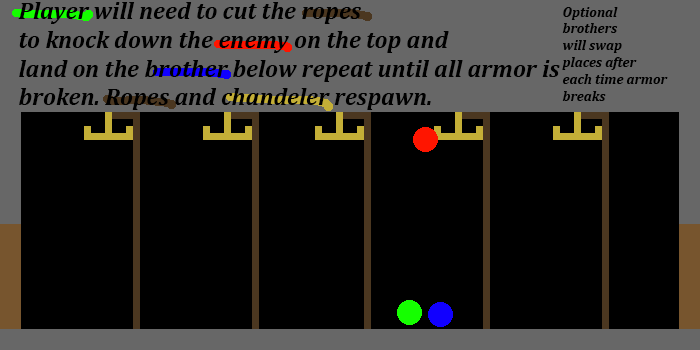
<style>
.page{position:relative;width:700px;height:350px;background:#000000}
.page>*{position:absolute;margin:0}
.t1{font:24px "Cambria-BoldItalic";color:#000000}
.t2{font:14px "Cambria-BoldItalic";color:#000000}
</style>
<div class="page">
<p class="t1" style="left:18px;top:2px;width:542px;height:108px">Player will need to cut the ropes<br>to knock down the enemy on the top and <br>land on the brother below repeat until all armor is<br>broken. Ropes and chandeler respawn.</p>
<p class="t2" style="left:562px;top:7px;width:106px;height:94px">Optional<br>brothers <br>will swap<br>places after<br>each time armor <br>breaks</p>
</div>
